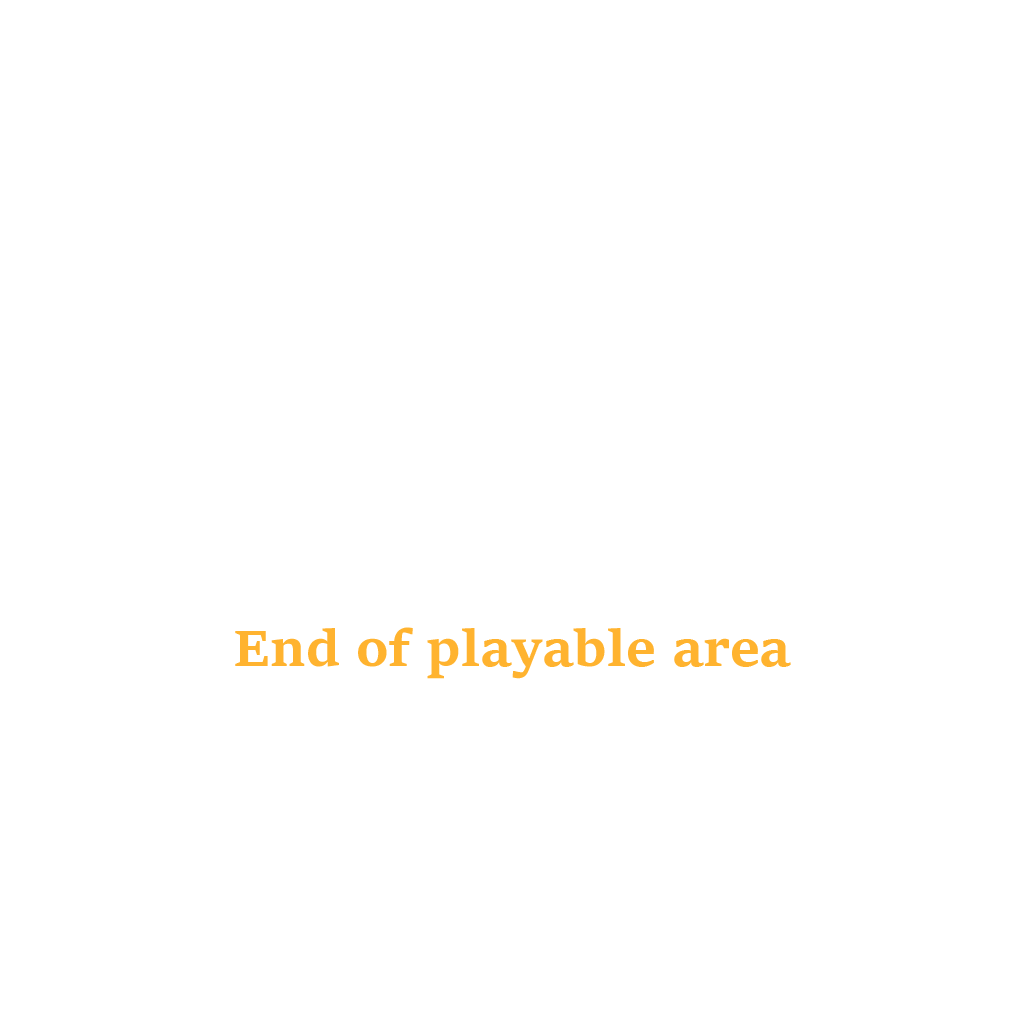
<style>
.page{position:relative;width:1024px;height:1024px;background:#ffffff}
.page>*{position:absolute;margin:0}
.t1{font:55.2px "Sitka-TextBold";color:#ffb32f}
</style>
<div class="page">
<p class="t1" style="left:235px;top:627px;width:556px;height:52px">End of playable area</p>
</div>
